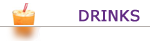
<style>
.page{position:relative;width:150px;height:42px;background:#ffffff}
.page>*{position:absolute;margin:0}
.t1{font:15px "Verdana";color:#612b83;font-weight:bold}
</style>
<div class="page">
<p class="t1" style="left:79px;top:9px;width:61px;height:13px">DRINKS</p>
</div>
